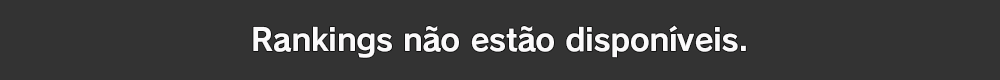
<style>
.page{position:relative;width:1000px;height:80px;background:#333333}
.page>*{position:absolute;margin:0}
.t1{font:30.7px "RodinPro-B";letter-spacing:-0.011em;color:#fbfafb}
</style>
<div class="page">
<p class="t1" style="left:253px;top:25px;width:493px;height:33px">Rankings não estão disponíveis.</p>
</div>
